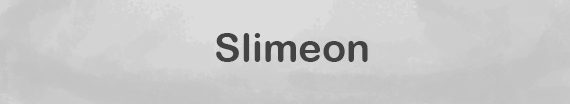
<style>
.page{position:relative;width:570px;height:104px}
.page>*{position:absolute;margin:0}
.t1{font:40px "ArialRoundedMTBold";color:#434343}
</style>
<div class="page">
<p class="t1" style="left:216px;top:33px;width:152px;height:29px">Slimeon</p>
</div>
